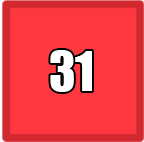
<style>
.page{position:relative;width:144px;height:142px;background:#ff3840}
.page>*{position:absolute;margin:0}
.t1{font:50px "Impact";color:#ffffff}
</style>
<div class="page">
<p class="t1" style="left:50px;top:50px;width:42px;height:42px">31</p>
</div>
